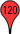
<style>
.page{position:relative;width:20px;height:34px;background:#ffffff}
.page>*{position:absolute;margin:0}
.t1{font:11px "DINAlternate-Bold";letter-spacing:-0.04em;color:#020000}
</style>
<div class="page">
<p class="t1" style="left:3px;top:6px;width:14px;height:8px">120</p>
</div>
